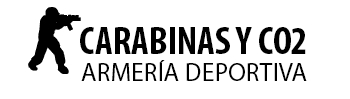
<style>
.page{position:relative;width:350px;height:99px;background:#ffffff}
.page>*{position:absolute;margin:0}
.t1{font:38.6px "MyriadPro-BoldCond";color:#000000}
.t2{font:25.8px "MyriadPro-Regular";color:#000000}
</style>
<div class="page">
<p class="t1" style="left:80px;top:27px;width:226px;height:27px">CARABINAS Y CO2</p>
<p class="t2" style="left:81px;top:60px;width:226px;height:21px">ARMERÍA DEPORTIVA</p>
</div>
